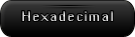
<style>
.page{position:relative;width:135px;height:37px}
.page>*{position:absolute;margin:0}
.t1{font:13px "System";letter-spacing:0.05em}
</style>
<div class="page">
<p class="t1" style="left:21px;top:11px;width:92px;height:10px">Hexadecimal</p>
</div>
